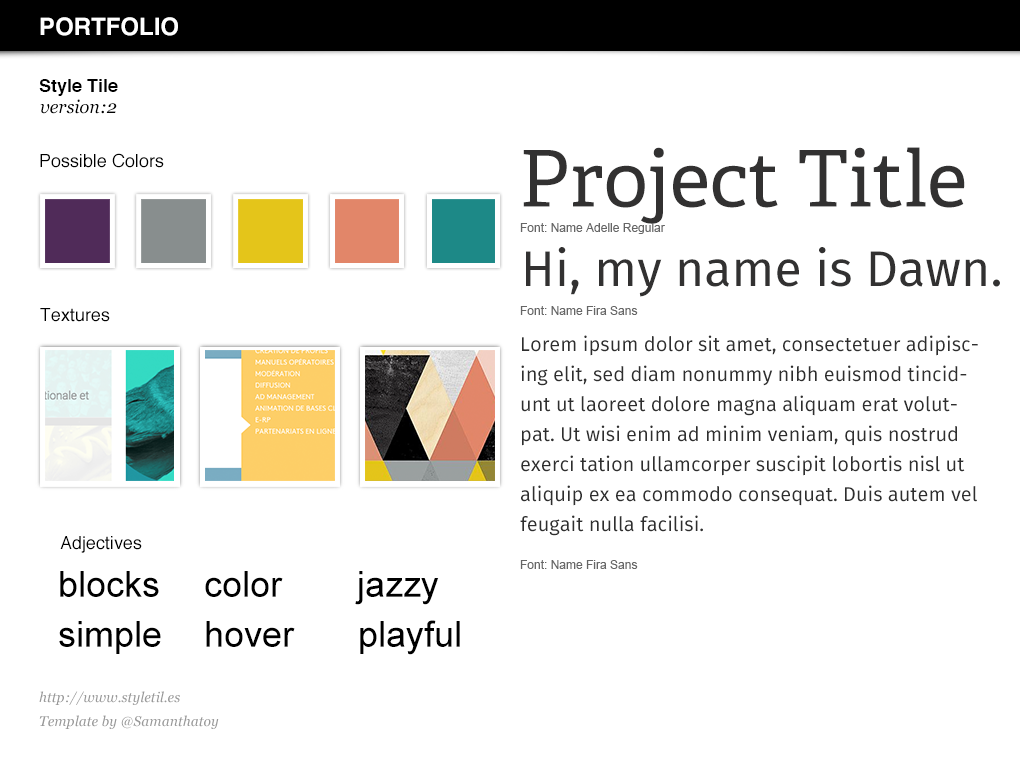
<style>
.page{position:relative;width:1020px;height:760px;background:#ffffff}
.page>*{position:absolute;margin:0}
.t1{font:24px "Helvetica-Bold";color:#ffffff}
.t2{font:18px "Helvetica-Bold";color:#000000}
.t3{font:18px "Georgia-Italic";color:#000000}
.t4{font:78px "Adelle-Regular";color:#323131}
.t5{font:18px "Helvetica";color:#000000}
.t6{font:12px "ArialMT";color:#666666}
.t7{font:50px "FiraSans-Regular";color:#323131}
.t8{font:20px/30px "FiraSans-Regular";color:#2e2e2e}
.t9{font:36px "ArialMT";color:#000000}
.t10{font:14px/24px "Georgia-Italic";color:#999999}
</style>
<div class="page">
<p class="t1" style="left:40px;top:17px;width:138px;height:19px">PORTFOLIO</p>
<p class="t2" style="left:39px;top:79px;width:79px;height:17px">Style Tile</p>
<p class="t3" style="left:40px;top:99px;width:77px;height:15px">version:2</p>
<p class="t4" style="left:523px;top:147px;width:442px;height:77px">Project Title</p>
<p class="t5" style="left:40px;top:153px;width:124px;height:15px">Possible Colors</p>
<p class="t6" style="left:520px;top:223px;width:145px;height:11px">Font: Name Adelle Regular</p>
<p class="t7" style="left:526px;top:247px;width:474px;height:50px">Hi, my name is Dawn.</p>
<p class="t5" style="left:40px;top:308px;width:70px;height:14px">Textures</p>
<p class="t6" style="left:520px;top:306px;width:118px;height:9px">Font: Name Fira Sans</p>
<p class="t8" style="left:520px;top:335px;width:458px;height:201px">Lorem ipsum dolor sit amet, consectetuer adipiscing elit, sed diam nonummy nibh euismod tincidunt ut laoreet dolore magna aliquam erat volutpat. Ut wisi enim ad minim veniam, quis nostrud exerci tation ullamcorper suscipit lobortis nisl ut aliquip ex ea commodo consequat. Duis autem vel feugait nulla facilisi.</p>
<p class="t5" style="left:60px;top:536px;width:82px;height:17px">Adjectives</p>
<p class="t6" style="left:520px;top:560px;width:118px;height:9px">Font: Name Fira Sans</p>
<p class="t9" style="left:60px;top:571px;width:99px;height:26px">blocks</p>
<p class="t9" style="left:205px;top:571px;width:78px;height:26px">color</p>
<p class="t9" style="left:355px;top:571px;width:84px;height:34px">jazzy</p>
<p class="t9" style="left:59px;top:621px;width:102px;height:33px">simple</p>
<p class="t9" style="left:206px;top:621px;width:89px;height:26px">hover</p>
<p class="t9" style="left:360px;top:620px;width:100px;height:35px">playful</p>
<p class="t10" style="left:39px;top:691px;width:180px;height:38px">http://www.styletil.es<br>Template by @Samanthatoy</p>
</div>
